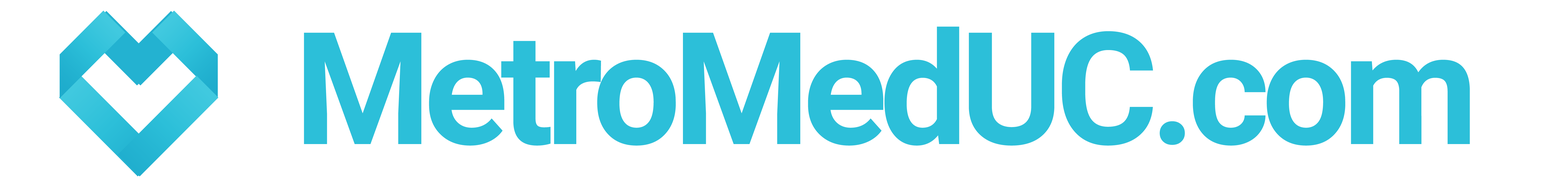
<style>
.page{position:relative;width:1568px;height:187px;background:#ffffff}
.page>*{position:absolute;margin:0}
.t1{font:156.8px "Roboto-Bold";letter-spacing:-0.05em;color:#2cbfd9}
</style>
<div class="page">
<p class="t1" style="left:304px;top:26px;width:1166px;height:120px">MetroMedUC.com</p>
</div>
